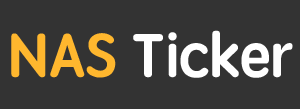
<style>
.page{position:relative;width:300px;height:109px;background:#333333}
.page>*{position:absolute;margin:0}
.t1{font:61px "STYuanti-SC-Bold";color:#ffffff}
.t2{font:61px "STYuanti-SC-Bold";color:#ffb72e}
</style>
<div class="page">
<p class="t1" style="left:11px;top:30px;width:282px;height:48px"><span class="t2">NAS </span>Ticker</p>
</div>
